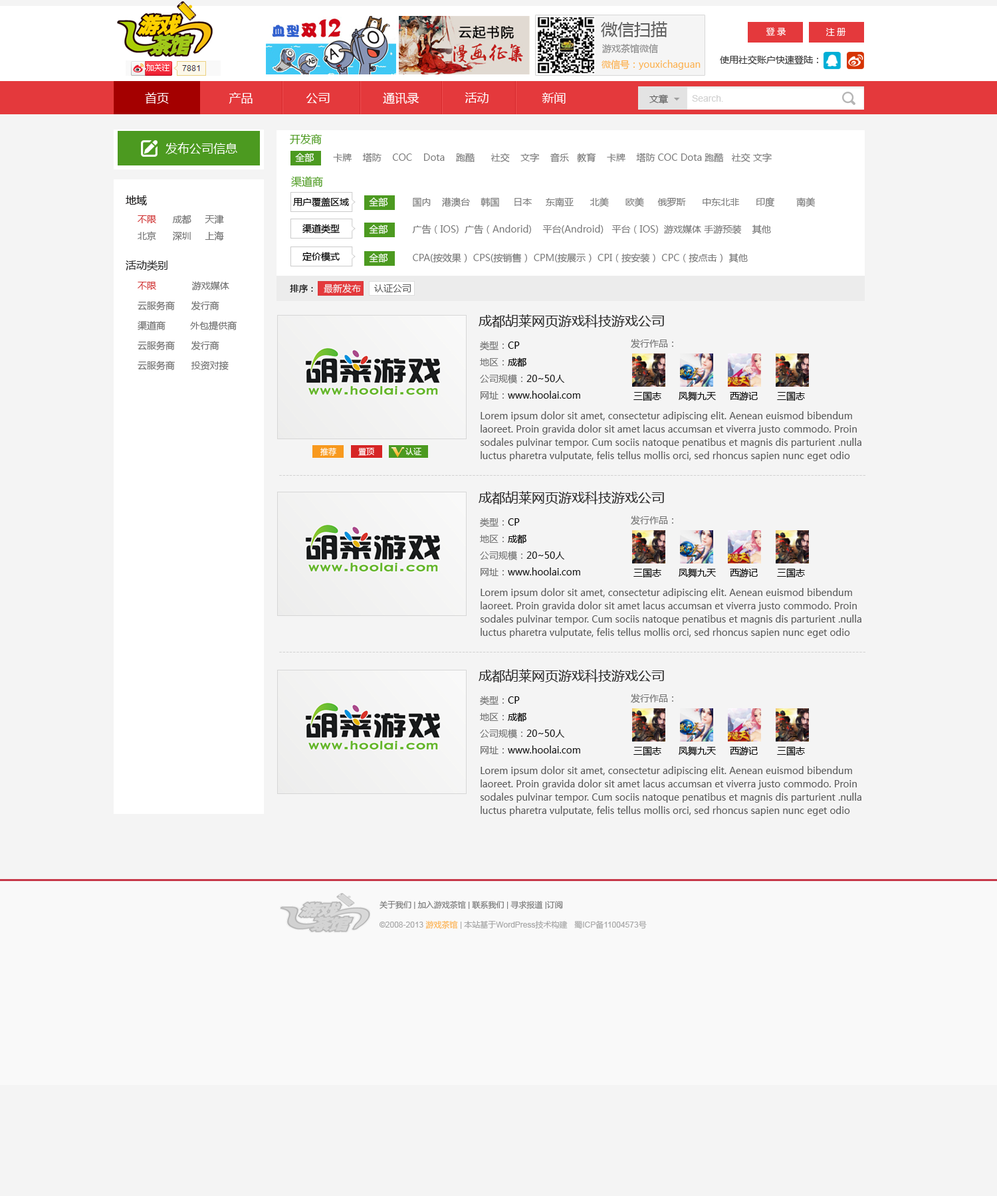
<style>
.page{position:relative;width:997px;height:1196px;background:#f4f4f4}
.page>*{position:absolute;margin:0}
.t1{font:16.6px "MicrosoftYaHei";color:#606060}
.t2{font:8.6px "MicrosoftYaHei";color:#ffffff}
.t3{font:9.3px "MicrosoftYaHei";color:#8a8a8a}
.t4{font:9.3px "MicrosoftYaHei";color:#fcb150}
.t5{font:9.3px "MicrosoftYaHei";color:#3a3a3a}
.t6{font:12px "MicrosoftYaHei";color:#ffffff}
.t7{font:9.3px "MicrosoftYaHei";color:#636363}
.t8{font:9.2px "ArialMT";color:#c7c7c7}
.t9{font:10.6px "MicrosoftYaHei";color:#4c9a20}
.t10{font:9.3px "MicrosoftYaHei";color:#7b7b7b}
.t11{font:9.3px "MicrosoftYaHei";color:#ffffff}
.t12{font:10.6px "MicrosoftYaHei";color:#100f0f}
.t13{font:9.3px "MicrosoftYaHei";color:#000000}
.t14{font:9.3px/16.6px "MicrosoftYaHei";color:#727272}
.t15{font:9.3px/16.6px "MicrosoftYaHei";color:#d03535}
.t16{font:10.6px "MicrosoftYaHei";color:#292929}
.t17{font:9.3px/19.9px "MicrosoftYaHei";color:#727272}
.t18{font:9.3px/19.9px "MicrosoftYaHei";color:#d03535}
.t19{font:8.8px "MicrosoftYaHei";color:#131313}
.t20{font:9.3px "MicrosoftYaHei";color:#f4f4f4}
.t21{font:9.3px "MicrosoftYaHei";color:#5c5c5c}
.t22{font:13.3px "MicrosoftYaHei";color:#2b2a2a}
.t23{font:9.3px/16.6px "MicrosoftYaHei";color:#181818}
.t24{font:9.3px/16.6px "MicrosoftYaHei";color:#757575}
.t25{font:9.3px/16.6px "MicrosoftYaHei";color:#060606}
.t26{font:9.3px/16.6px "MicrosoftYaHei";color:#040404}
.t27{font:9.3px/16.6px "MicrosoftYaHei";color:#6f6f6f}
.t28{font:9.3px "MicrosoftYaHei";color:#757575}
.t29{font:9.3px "MicrosoftYaHei";color:#070707}
.t30{font:9.3px/13.3px "MicrosoftYaHei";color:#595959}
.t31{font:8px "MicrosoftYaHei";color:#ffffff}
.t32{font:8px "ArialMT";letter-spacing:0.1em;color:#d1d1d1}
.t33{font:8px/19.9px "ArialMT";color:#a7a7a7}
.t34{font:8px/19.9px "MicrosoftYaHei";color:#7a7a7a}
.t35{font:8px/19.9px "ArialMT";color:#7a7a7a}
.t36{font:8px/19.9px "MicrosoftYaHei";color:#fcb150}
.t37{font:8px/19.9px "MicrosoftYaHei";color:#a7a7a7}
</style>
<div class="page">
<p class="t1" style="left:601px;top:21px;width:66px;height:16px">微信扫描</p>
<p class="t2" style="left:766px;top:27px;width:20px;height:9px">登 录</p>
<p class="t2" style="left:825px;top:28px;width:21px;height:8px">注 册</p>
<p class="t3" style="left:602px;top:44px;width:56px;height:10px">游戏茶馆微信</p>
<p class="t4" style="left:601px;top:60px;width:99px;height:10px">微信号：youxichaguan</p>
<p class="t5" style="left:720px;top:55px;width:98px;height:9px">使用社交账户快速登陆：</p>
<p class="t6" style="left:145px;top:92px;width:421px;height:12px">首页                 产品               公司               通讯录             活动               新闻</p>
<p class="t7" style="left:649px;top:94px;width:19px;height:10px">文章</p>
<p class="t8" style="left:692px;top:95px;width:31px;height:7px;opacity:0.81">Search.</p>
<p class="t9" style="left:290px;top:134px;width:32px;height:11px">开发商</p>
<p class="t6" style="left:165px;top:142px;width:72px;height:12px">发布公司信息</p>
<p class="t10" style="left:295px;top:153px;width:477px;height:9px"><span class="t11"> 全部 </span>      卡牌    塔防    COC    Dota    跑酷      社交    文字    音乐   教育    卡牌    塔防 COC Dota 跑酷   社交 文字</p>
<p class="t9" style="left:291px;top:176px;width:32px;height:11px">渠道商</p>
<p class="t12" style="left:126px;top:195px;width:21px;height:10px">地域</p>
<p class="t13" style="left:293px;top:197px;width:56px;height:10px">用户覆盖区域</p>
<p class="t10" style="left:369px;top:197px;width:446px;height:10px"><span class="t11"> 全部 </span>        国内    港澳台    韩国     日本     东南亚      北美      欧美     俄罗斯      中东北非      印度        南美</p>
<p class="t14" style="left:138px;top:215px;width:86px;height:26px"><span class="t15">不限 </span>     成都     天津 <br>北京      深圳     上海</p>
<p class="t13" style="left:302px;top:224px;width:38px;height:10px">渠道类型</p>
<p class="t10" style="left:369px;top:225px;width:402px;height:10px"><span class="t11"> 全部 </span>        广告（IOS)  广告（Andorid)    平台(Android)   平台（IOS)  游戏媒体 手游预装    其他</p>
<p class="t13" style="left:302px;top:252px;width:38px;height:9px">定价模式</p>
<p class="t10" style="left:369px;top:253px;width:379px;height:10px"><span class="t11"> 全部 </span>        CPA(按效果） CPS(按销售） CPM(按展示） CPI（按安装） CPC（按点击） 其他</p>
<p class="t16" style="left:126px;top:260px;width:41px;height:11px">活动类别</p>
<p class="t17" style="left:138px;top:281px;width:99px;height:89px"><span class="t18">不限 </span>            游戏媒体<br>云服务商      发行商<br>渠道商         外包提供商<br>云服务商      发行商<br>云服务商      投资对接</p>
<p class="t19" style="left:290px;top:284px;width:23px;height:9px">排序：</p>
<p class="t20" style="left:324px;top:284px;width:37px;height:10px">最新发布</p>
<p class="t21" style="left:374px;top:284px;width:37px;height:8px">认证公司</p>
<p class="t22" style="left:478px;top:314px;width:186px;height:14px">成都胡莱网页游戏科技游戏公司</p>
<p class="t23" style="left:480px;top:341px;width:100px;height:58px"><span class="t24">类型：</span><span class="t25">CP<br></span><span class="t24">地区：</span><span class="t26">成都<br></span><span class="t24">公司规模：</span>20~50人<br><span class="t27">网址：</span>www.hoolai.com</p>
<p class="t28" style="left:631px;top:339px;width:42px;height:9px">发行作品：</p>
<p class="t29" style="left:633px;top:391px;width:28px;height:10px">三国志</p>
<p class="t29" style="left:679px;top:391px;width:37px;height:10px">凤舞九天</p>
<p class="t29" style="left:730px;top:391px;width:28px;height:10px">西游记</p>
<p class="t29" style="left:777px;top:391px;width:28px;height:10px">三国志</p>
<p class="t30" style="left:480px;top:411px;width:381px;height:50px">Lorem ipsum dolor sit amet, consectetur adipiscing elit. Aenean euismod bibendum laoreet. Proin gravida dolor sit amet lacus accumsan et viverra justo commodo. Proin sodales pulvinar tempor. Cum sociis natoque penatibus et magnis dis parturient .nulla luctus pharetra vulputate, felis tellus mollis orci, sed rhoncus sapien nunc eget odio</p>
<p class="t31" style="left:320px;top:447px;width:16px;height:9px">推荐</p>
<p class="t31" style="left:358px;top:448px;width:16px;height:8px">置顶</p>
<p class="t31" style="left:405px;top:448px;width:16px;height:7px">认证</p>
<p class="t32" style="left:279px;top:475px;width:586px;height:1px">--------------------------------------------------------------------------------------------------------------------------------------------------------------------------</p>
<p class="t22" style="left:478px;top:491px;width:186px;height:13px">成都胡莱网页游戏科技游戏公司</p>
<p class="t23" style="left:480px;top:518px;width:100px;height:58px"><span class="t24">类型：</span><span class="t25">CP<br></span><span class="t24">地区：</span><span class="t26">成都<br></span><span class="t24">公司规模：</span>20~50人<br><span class="t27">网址：</span>www.hoolai.com</p>
<p class="t28" style="left:631px;top:516px;width:42px;height:9px">发行作品：</p>
<p class="t29" style="left:633px;top:568px;width:28px;height:10px">三国志</p>
<p class="t29" style="left:679px;top:568px;width:37px;height:10px">凤舞九天</p>
<p class="t29" style="left:730px;top:568px;width:28px;height:10px">西游记</p>
<p class="t29" style="left:777px;top:568px;width:28px;height:10px">三国志</p>
<p class="t30" style="left:480px;top:588px;width:381px;height:50px">Lorem ipsum dolor sit amet, consectetur adipiscing elit. Aenean euismod bibendum laoreet. Proin gravida dolor sit amet lacus accumsan et viverra justo commodo. Proin sodales pulvinar tempor. Cum sociis natoque penatibus et magnis dis parturient .nulla luctus pharetra vulputate, felis tellus mollis orci, sed rhoncus sapien nunc eget odio</p>
<p class="t32" style="left:279px;top:652px;width:586px;height:1px">--------------------------------------------------------------------------------------------------------------------------------------------------------------------------</p>
<p class="t22" style="left:478px;top:669px;width:186px;height:14px">成都胡莱网页游戏科技游戏公司</p>
<p class="t23" style="left:480px;top:696px;width:100px;height:58px"><span class="t24">类型：</span><span class="t25">CP<br></span><span class="t24">地区：</span><span class="t26">成都<br></span><span class="t24">公司规模：</span>20~50人<br><span class="t27">网址：</span>www.hoolai.com</p>
<p class="t28" style="left:631px;top:694px;width:42px;height:9px">发行作品：</p>
<p class="t29" style="left:633px;top:746px;width:28px;height:10px">三国志</p>
<p class="t29" style="left:679px;top:746px;width:37px;height:10px">凤舞九天</p>
<p class="t29" style="left:730px;top:746px;width:28px;height:10px">西游记</p>
<p class="t29" style="left:777px;top:746px;width:28px;height:10px">三国志</p>
<p class="t30" style="left:480px;top:766px;width:381px;height:50px">Lorem ipsum dolor sit amet, consectetur adipiscing elit. Aenean euismod bibendum laoreet. Proin gravida dolor sit amet lacus accumsan et viverra justo commodo. Proin sodales pulvinar tempor. Cum sociis natoque penatibus et magnis dis parturient .nulla luctus pharetra vulputate, felis tellus mollis orci, sed rhoncus sapien nunc eget odio</p>
<p class="t33" style="left:379px;top:900px;width:268px;height:29px"><span class="t34">关于我们</span><span class="t35"> | </span><span class="t34">加入游戏茶馆</span><span class="t35"> | </span><span class="t34">联系我们</span><span class="t35"> | </span><span class="t34">寻求报道</span><span class="t35"> |</span><span class="t34">订阅<br></span>©2008-2013 <span class="t36">游戏茶馆</span> | <span class="t37">本站基于</span>WordPress<span class="t37">技术构建   蜀</span>ICP<span class="t37">备</span>11004573<span class="t37">号</span></p>
</div>
